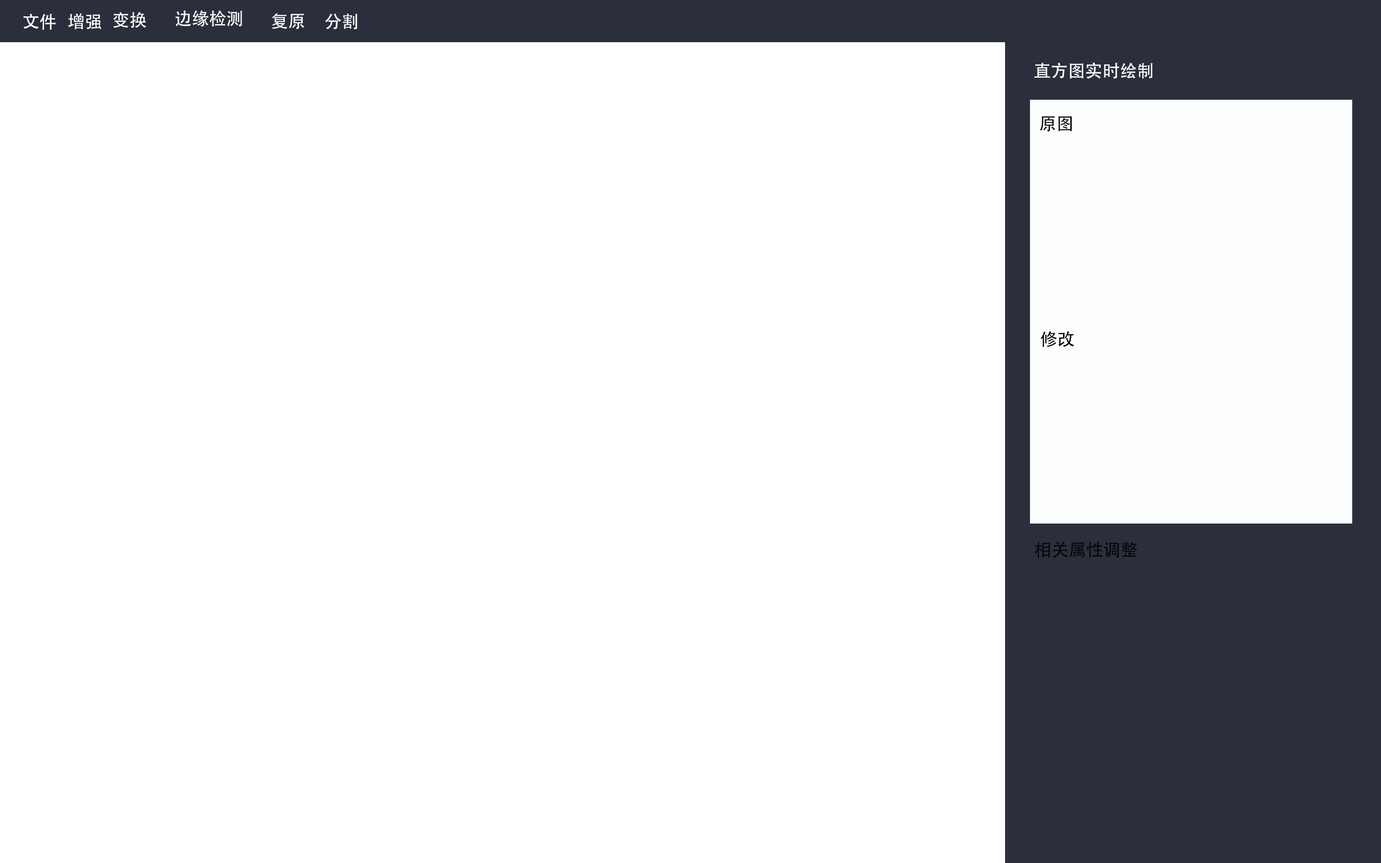
<style>
.page{position:relative;width:1381px;height:863px;background:#ffffff}
.page>*{position:absolute;margin:0}
.t1{font:17.3px "AdobeHeitiStd-Regular";color:#fefefe}
.t2{font:17.3px "AdobeHeitiStd-Regular";color:#050505}
</style>
<div class="page">
<p class="t1" style="left:23px;top:14px;width:33px;height:16px">文件</p>
<p class="t1" style="left:68px;top:13px;width:33px;height:16px">增强</p>
<p class="t1" style="left:113px;top:12px;width:33px;height:16px">变换</p>
<p class="t1" style="left:176px;top:10px;width:66px;height:17px">边缘检测</p>
<p class="t1" style="left:272px;top:13px;width:33px;height:16px">复原</p>
<p class="t1" style="left:325px;top:13px;width:33px;height:16px">分割</p>
<p class="t1" style="left:1035px;top:62px;width:118px;height:17px">直方图实时绘制</p>
<p class="t2" style="left:1040px;top:116px;width:32px;height:16px">原图</p>
<p class="t2" style="left:1041px;top:331px;width:33px;height:16px">修改</p>
<p class="t2" style="left:1035px;top:541px;width:102px;height:17px">相关属性调整</p>
</div>
